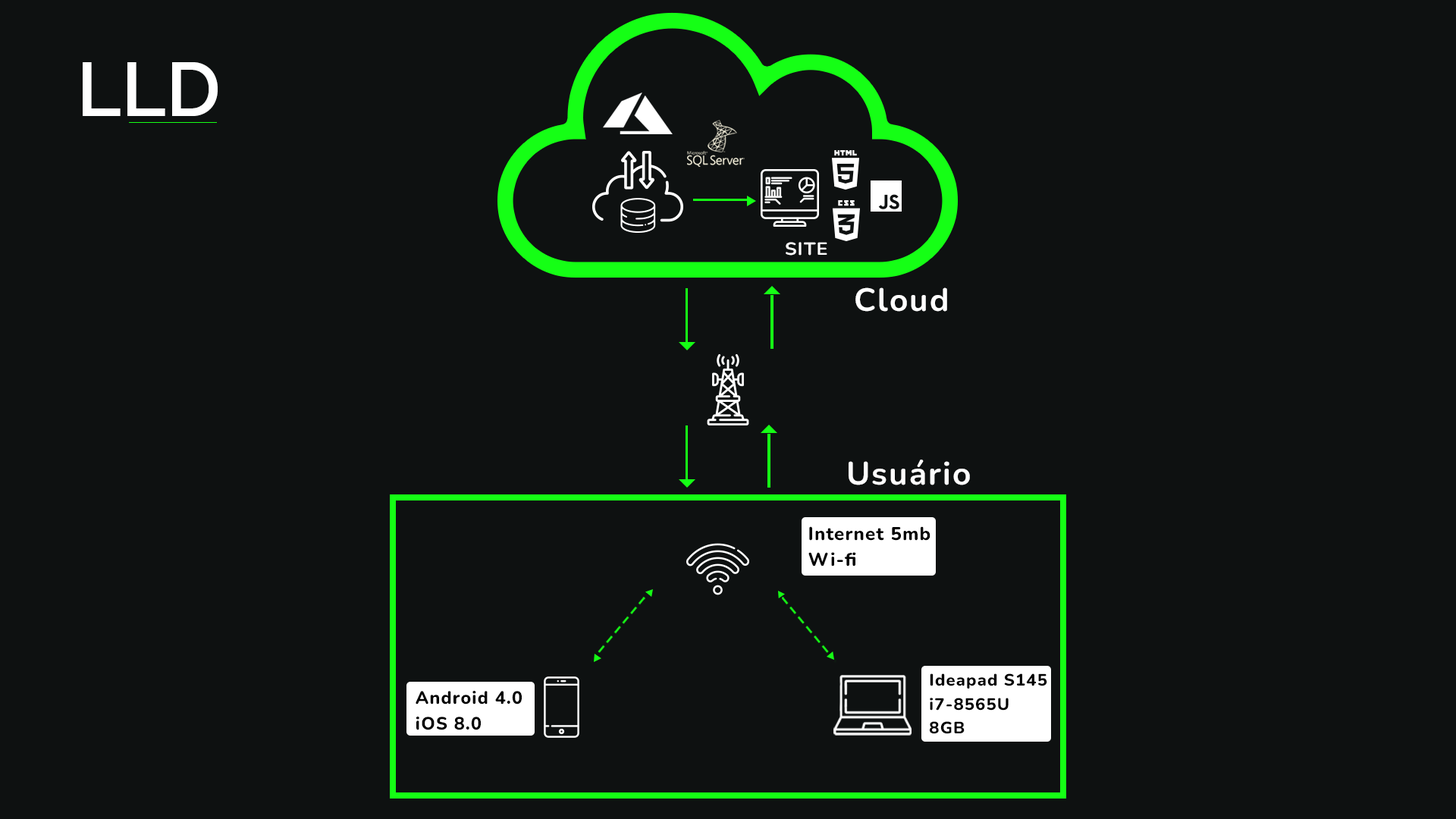
<style>
.page{position:relative;width:1456px;height:819px;background:#0e1111}
.page>*{position:absolute;margin:0}
.t1{font:75.8px "Raleway-SemiBold";color:#ffffff}
.t2{font:17.5px "Nunito-Bold";letter-spacing:0.05em;color:#ffffff;scale:1.08 1}
.t3{font:32.2px "Nunito-Bold";letter-spacing:0.05em;color:#ffffff}
.t4{font:18.2px/25.8px "Nunito-ExtraBold";letter-spacing:0.05em;color:#000000}
.t5{font:16.3px/24px "Nunito-ExtraBold";letter-spacing:0.05em;color:#000000}
.t6{font:17.6px/25.9px "Nunito-ExtraBold";letter-spacing:0.05em;color:#000000}
</style>
<div class="page">
<p class="t1" style="left:83px;top:62px;width:135px;height:54px">LLD</p>
<p class="t2" style="left:786px;top:242px;width:41px;height:14px">SITE</p>
<p class="t3" style="left:855px;top:287px;width:92px;height:25px">Cloud</p>
<p class="t3" style="left:849px;top:460px;width:121px;height:25px">Usuário</p>
<p class="t4" style="left:808px;top:526px;width:122px;height:40px">Internet 5mb<br>Wi-fi</p>
<p class="t5" style="left:930px;top:673px;width:117px;height:61px">Ideapad S145<br>i7-8565U<br>8GB</p>
<p class="t6" style="left:416px;top:691px;width:106px;height:39px">Android 4.0<br>iOS 8.0</p>
</div>
